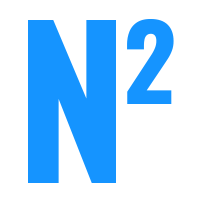
<style>
.page{position:relative;width:200px;height:200px;background:#ffffff}
.page>*{position:absolute;margin:0}
.t1{font:200px "Oswald-Bold";letter-spacing:-0.025em;color:#1594ff}
.t2{font:104.4px "Oswald-Bold";letter-spacing:-0.025em;color:#1594ff}
</style>
<div class="page">
<p class="t1" style="left:28px;top:20px;width:88px;height:163px">N</p>
<p class="t2" style="left:127px;top:19px;width:47px;height:85px">2</p>
</div>
